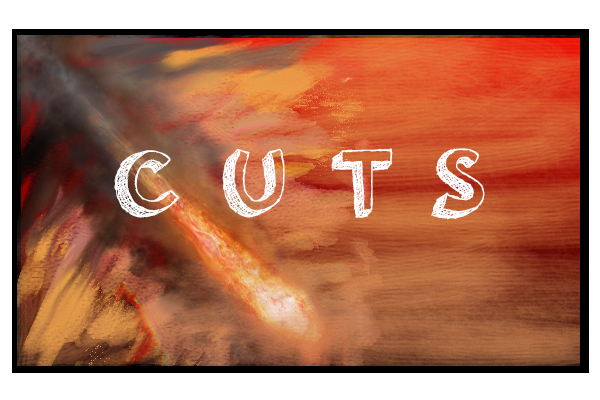
<style>
.page{position:relative;width:600px;height:400px}
.page>*{position:absolute;margin:0}
.t1{font:95px "orangejuice";letter-spacing:0.5em;color:#ffffff;text-transform:uppercase}
</style>
<div class="page">
<p class="t1" style="left:114px;top:148px;width:371px;height:72px">Cuts</p>
</div>
